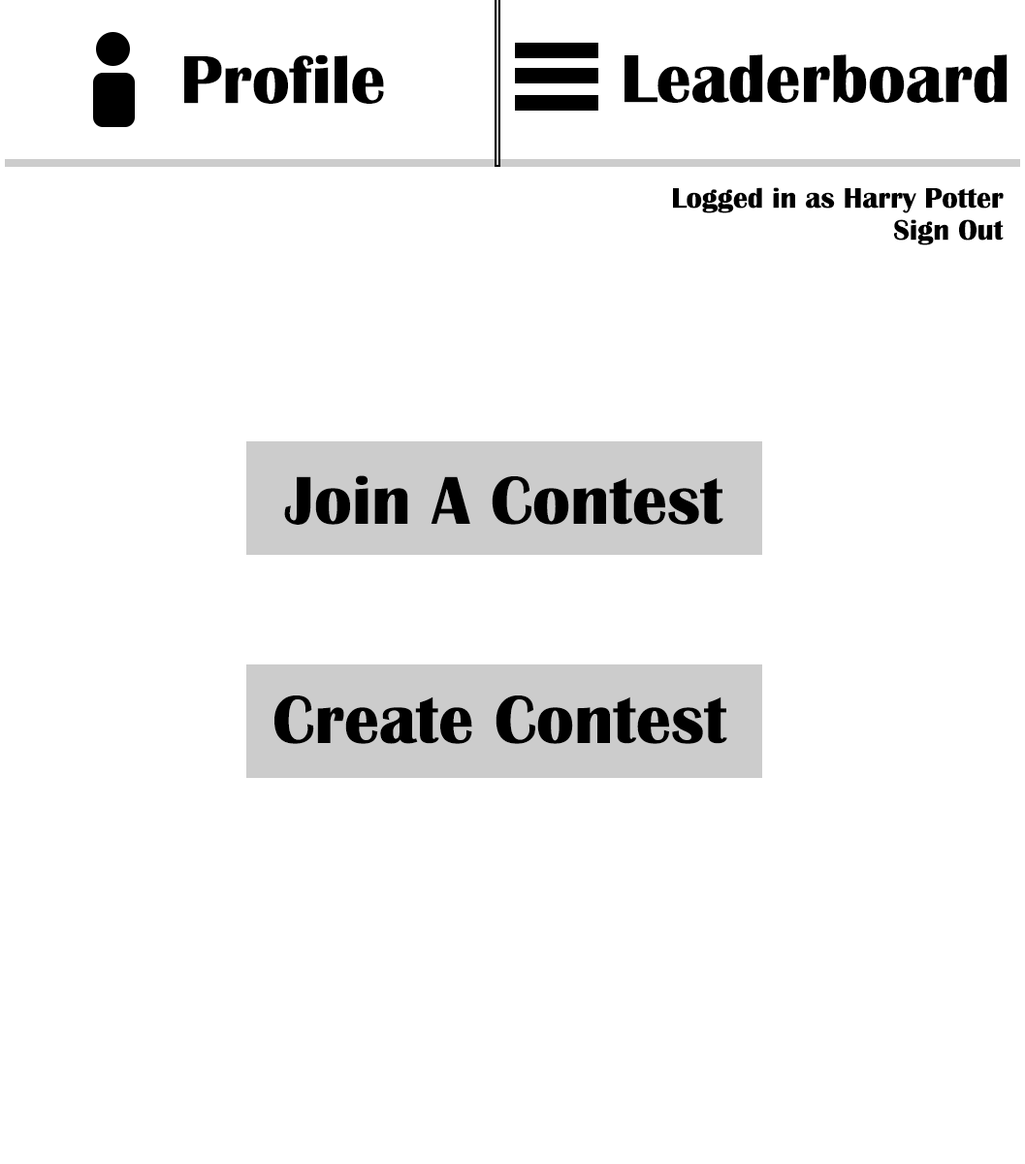
<style>
.page{position:relative;width:1025px;height:1164px;background:#ffffff}
.page>*{position:absolute;margin:0}
.t1{font:69.8px "BritannicBold";color:#000000}
.t2{font:29.1px "BritannicBold";color:#000000}
</style>
<div class="page">
<p class="t1" style="left:184px;top:54px;width:200px;height:50px">Profile</p>
<p class="t1" style="left:624px;top:54px;width:383px;height:49px">Leaderboard</p>
<p class="t2" style="left:673px;top:187px;width:331px;height:26px">Logged in as Harry Potter</p>
<p class="t2" style="left:894px;top:219px;width:110px;height:26px">Sign Out</p>
<p class="t1" style="left:284px;top:475px;width:439px;height:50px">Join A Contest</p>
<p class="t1" style="left:274px;top:695px;width:453px;height:49px">Create Contest</p>
</div>
